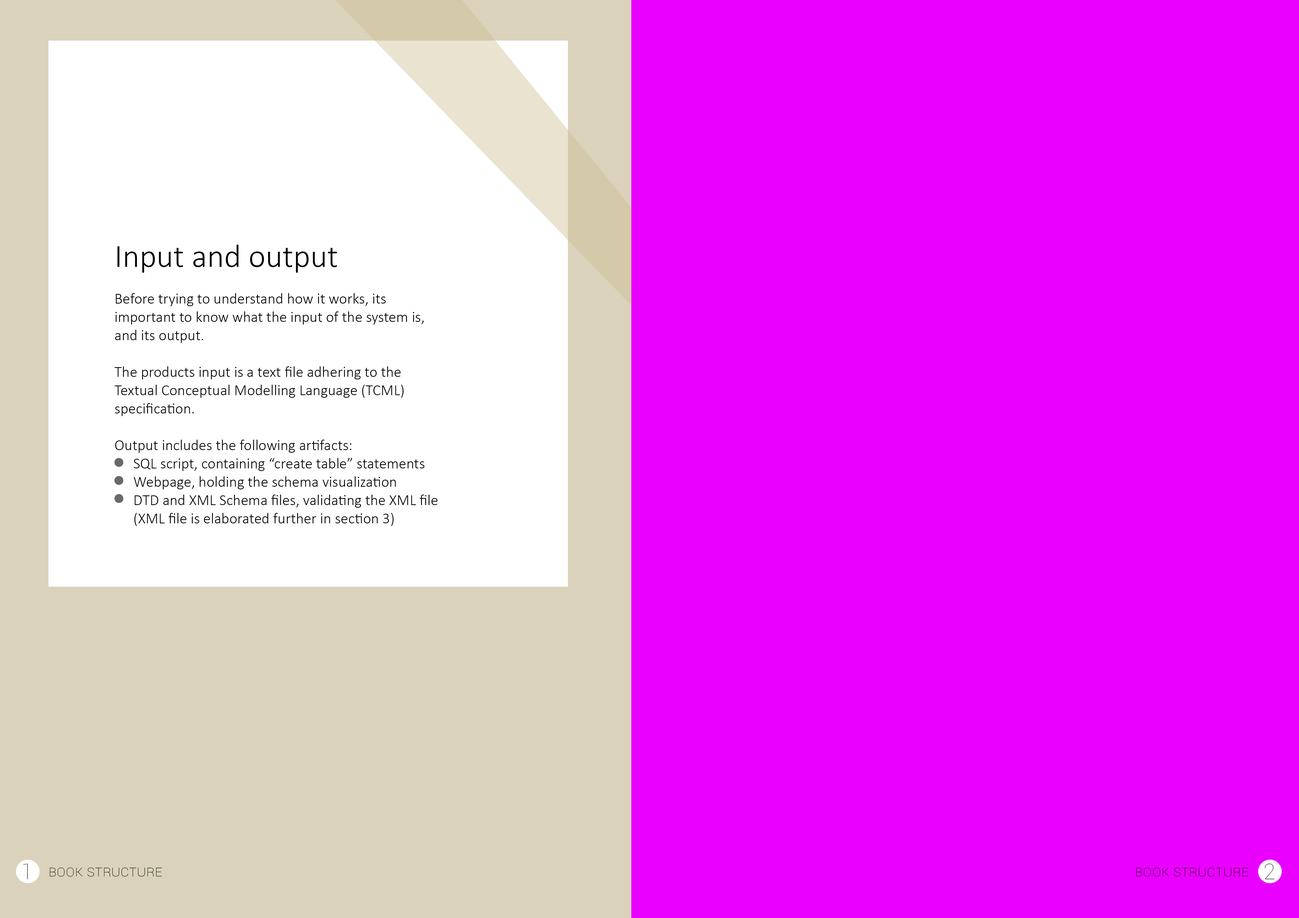
<style>
.page{position:relative;width:1299px;height:918px;background:#ea00ff}
.page>*{position:absolute;margin:0}
.t1{font:15.3px "Calibri-Light";color:#000000}
.t2{font:32.7px "Calibri-Light";color:#000000}
.t3{font:21.8px "Roboto-Thin";color:#484848}
.t4{font:15.3px "Roboto-Thin";color:#000000;font-variant:small-caps}
</style>
<div class="page">
<p class="t1" style="left:114px;top:245px;width:323px;height:281px"><span class="t2">Input and output<br></span><br>Before trying to understand how it works, its important to know what the input of the system is, and its output.<br><br>The products input is a text file adhering to the Textual Conceptual Modelling Language (TCML) specification.<br><br>Output includes the following artifacts:<br>  SQL script, containing “create table” statements<br>  Webpage, holding the schema visualization<br>  DTD and XML Schema files, validating the XML file    (XML file is elaborated further in section 3)</p>
<p class="t3" style="left:23px;top:864px;width:5px;height:16px">1</p>
<p class="t4" style="left:50px;top:868px;width:112px;height:9px">Book structure</p>
<p class="t4" style="left:1136px;top:868px;width:112px;height:9px">Book structure</p>
<p class="t3" style="left:1264px;top:864px;width:10px;height:16px">2</p>
</div>
